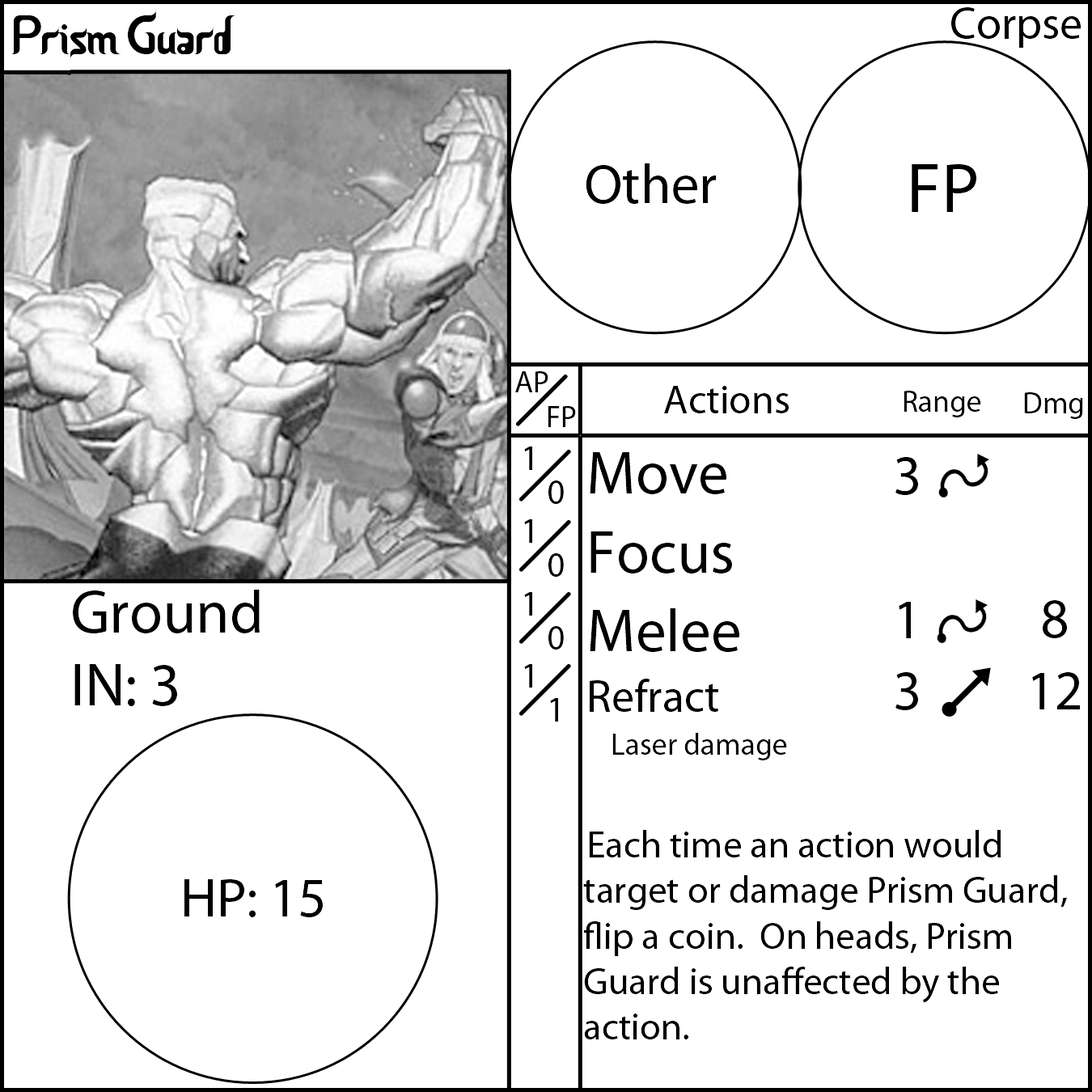
<style>
.page{position:relative;width:1092px;height:1092px;background:#ffffff}
.page>*{position:absolute;margin:0}
.t1{font:55.6px "CeriaLebaran";color:#000000}
.t2{font:45.5px "MyriadPro-Regular";color:#000000}
.t3{font:55.6px "MyriadPro-Regular";color:#000000}
.t4{font:70.8px "MyriadPro-Regular";color:#000000}
.t5{font:30.3px "MyriadPro-Regular";color:#000000}
.t6{font:40.4px "MyriadPro-Regular";color:#000000}
.t7{font:35.4px "MyriadPro-Regular";color:#000000}
.t8{font:37.9px "MyriadPro-Regular";color:#000000}
.t9{font:60.7px "MyriadPro-Regular";color:#000000}
</style>
<div class="page">
<p class="t1" style="left:11px;top:10px;width:225px;height:50px">Prism Guard</p>
<p class="t2" style="left:951px;top:7px;width:130px;height:41px">Corpse</p>
<p class="t3" style="left:586px;top:163px;width:131px;height:41px">Other</p>
<p class="t4" style="left:912px;top:164px;width:64px;height:48px">FP</p>
<p class="t5" style="left:515px;top:371px;width:33px;height:21px">AP</p>
<p class="t6" style="left:664px;top:386px;width:125px;height:27px">Actions</p>
<p class="t5" style="left:904px;top:391px;width:77px;height:26px">Range</p>
<p class="t5" style="left:1024px;top:392px;width:59px;height:27px">Dmg</p>
<p class="t5" style="left:548px;top:406px;width:28px;height:21px">FP</p>
<p class="t7" style="left:524px;top:447px;width:8px;height:241px">1<br>1<br>1<br>1</p>
<p class="t8" style="left:583px;top:452px;width:484px;height:587px"><span class="t9">Move<br>Focus<br>Melee<br></span><span class="t2">Refract<br></span><span class="t5"> Laser damage<br></span><br>Each time an action would target or damage Prism Guard, flip a coin.  On heads, Prism Guard is unaffected by the action.</p>
<p class="t3" style="left:895px;top:457px;width:23px;height:253px;text-align:center">3<br><br>1<br>3</p>
<p class="t7" style="left:548px;top:480px;width:16px;height:242px">0<br>0<br>0<br>1</p>
<p class="t9" style="left:73px;top:590px;width:187px;height:116px">Ground<br>IN: 3</p>
<p class="t3" style="left:1032px;top:600px;width:48px;height:109px;text-align:center">8<br>12</p>
<p class="t3" style="left:184px;top:879px;width:139px;height:38px">HP: 15</p>
</div>
